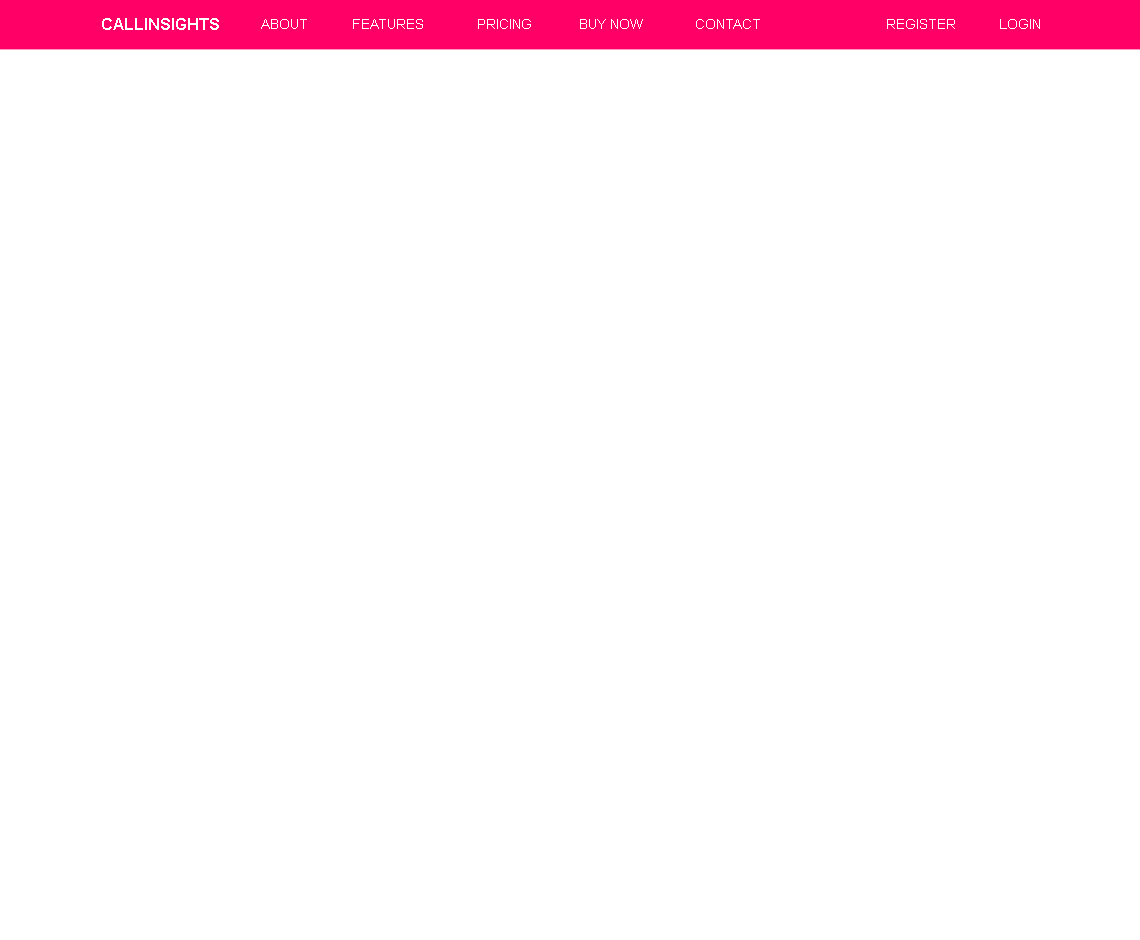
<style>
.page{position:relative;width:1140px;height:940px;background:#ffffff}
.page>*{position:absolute;margin:0}
.t1{font:16px "Arial-BoldMT";color:#ffffff}
.t2{font:14px "ArialMT";color:#ffffff}
</style>
<div class="page">
<p class="t1" style="left:102px;top:18px;width:117px;height:12px">CALLINSIGHTS</p>
<p class="t2" style="left:261px;top:19px;width:46px;height:10px">ABOUT</p>
<p class="t2" style="left:353px;top:19px;width:70px;height:10px">FEATURES</p>
<p class="t2" style="left:478px;top:19px;width:53px;height:10px">PRICING</p>
<p class="t2" style="left:580px;top:19px;width:63px;height:10px">BUY NOW</p>
<p class="t2" style="left:696px;top:19px;width:64px;height:10px">CONTACT</p>
<p class="t2" style="left:887px;top:19px;width:68px;height:10px">REGISTER</p>
<p class="t2" style="left:1000px;top:19px;width:40px;height:10px">LOGIN</p>
</div>
